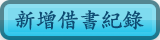
<style>
.page{position:relative;width:160px;height:40px}
.page>*{position:absolute;margin:0}
.t1{font:21.7px "STKaitiSC-Bold";color:#0d4d75}
</style>
<div class="page">
<p class="t1" style="left:15px;top:10px;width:129px;height:21px">新增借書紀錄</p>
</div>
